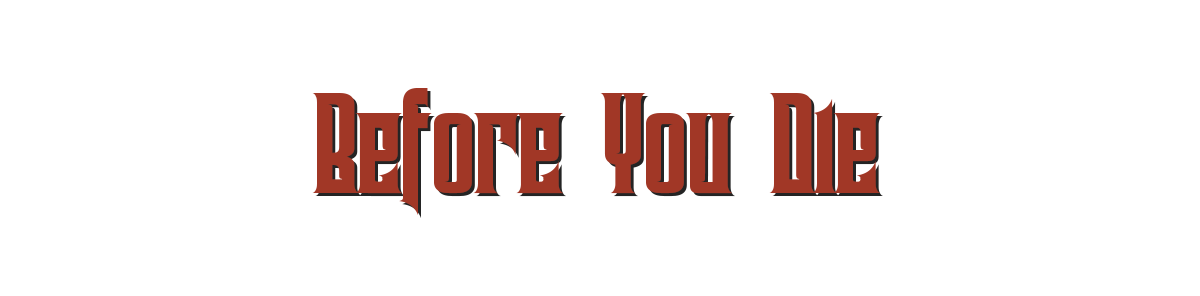
<style>
.page{position:relative;width:1200px;height:296px;background:#ffffff}
.page>*{position:absolute;margin:0}
.t1{font:200px "Pindunk";color:#a13726}
</style>
<div class="page">
<p class="t1" style="left:312px;top:88px;width:568px;height:127px">Before You Die</p>
</div>
